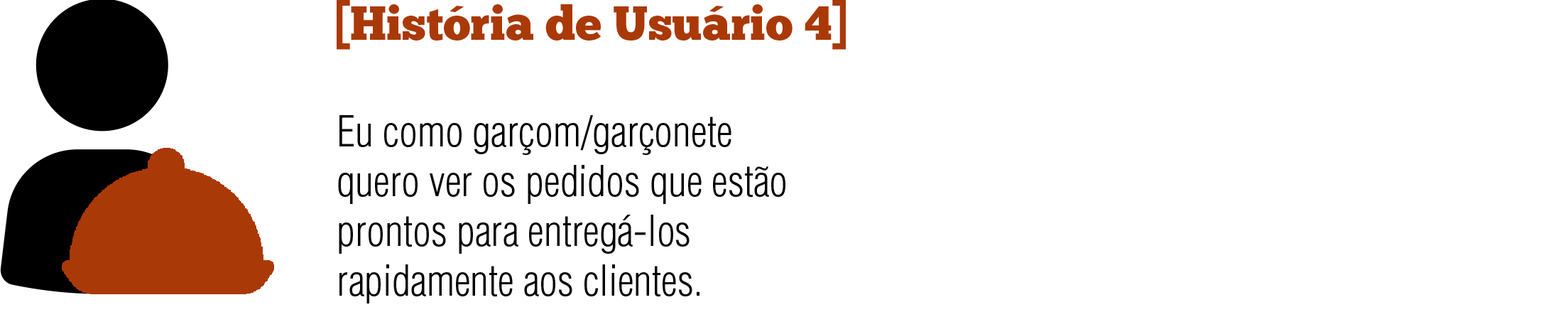
<style>
.page{position:relative;width:1568px;height:317px;background:#ffffff}
.page>*{position:absolute;margin:0}
.t1{font:47.3px "ChunkFive-Regular";color:#aa3908}
.t2{font:41.4px "Helvetica-Condensed-Light";color:#040404}
</style>
<div class="page">
<p class="t1" style="left:337px;top:0px;width:509px;height:50px">[História de Usuário 4]</p>
<p class="t2" style="left:338px;top:115px;width:447px;height:188px">Eu como garçom/garçonete quero ver os pedidos que estão prontos para entregá-los rapidamente aos clientes.</p>
</div>
